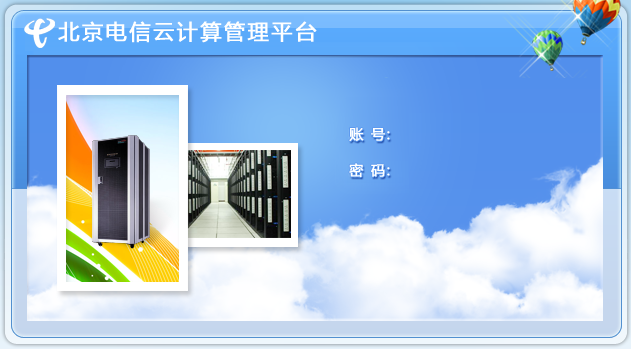
<style>
.page{position:relative;width:631px;height:349px}
.page>*{position:absolute;margin:0}
.t1{font:21px "MicrosoftYaHei";letter-spacing:0.1em;color:#ffffff;font-weight:bold}
</style>
<div class="page">
<p class="t1" style="left:58px;top:21px;width:259px;height:22px">北京电信云计算管理平台</p>
</div>
